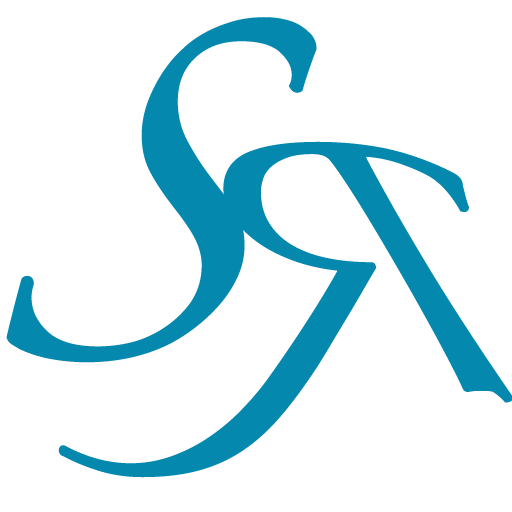
<style>
.page{position:relative;width:512px;height:512px;background:#ffffff}
.page>*{position:absolute;margin:0}
.t1{font:300px "Zapfino";color:#0588ae;font-weight:bold}
.t2{font:219.7px "Zapfino";color:#0588ae;font-weight:bold}
</style>
<div class="page">
<p class="t1" style="left:6px;top:17px;width:311px;height:346px">S</p>
<p class="t2" style="left:58px;top:141px;width:455px;height:337px;rotate:180deg">R</p>
</div>
